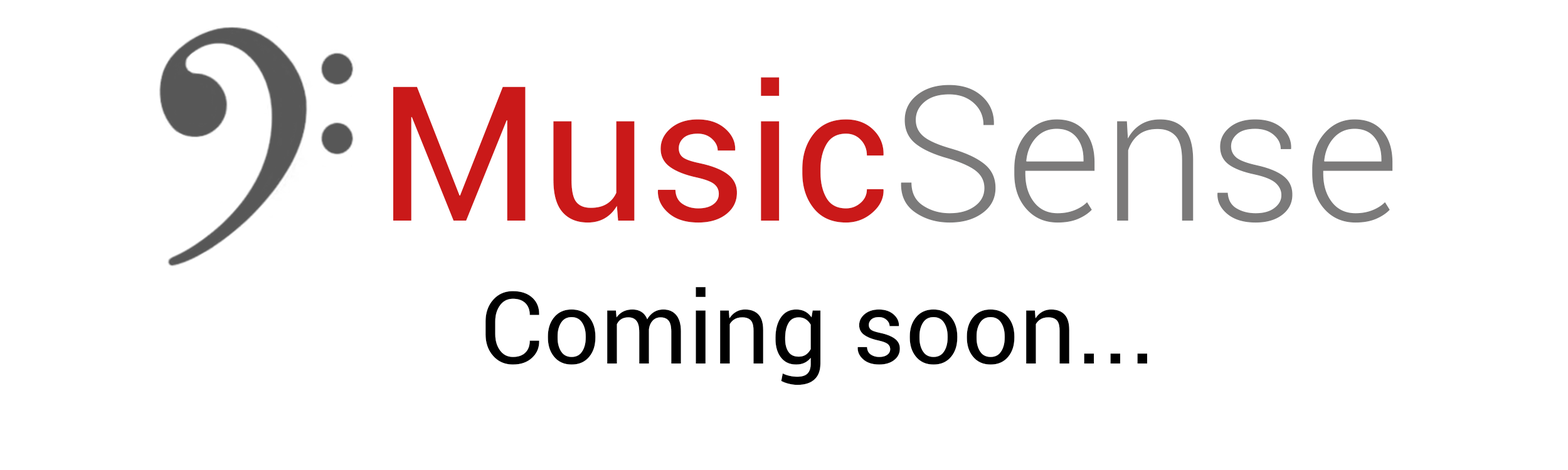
<style>
.page{position:relative;width:1568px;height:470px;background:#ffffff}
.page>*{position:absolute;margin:0}
.t1{font:188.2px "Roboto-Regular";color:#ca1919}
.t2{font:188.2px "Roboto-Light";color:#7b7a7a}
.t3{font:100.4px "Roboto-Regular";color:#000000}
</style>
<div class="page">
<p class="t1" style="left:393px;top:77px;width:1000px;height:146px">Music<span class="t2">Sense</span></p>
<p class="t3" style="left:485px;top:287px;width:662px;height:99px">Coming soon...</p>
</div>
